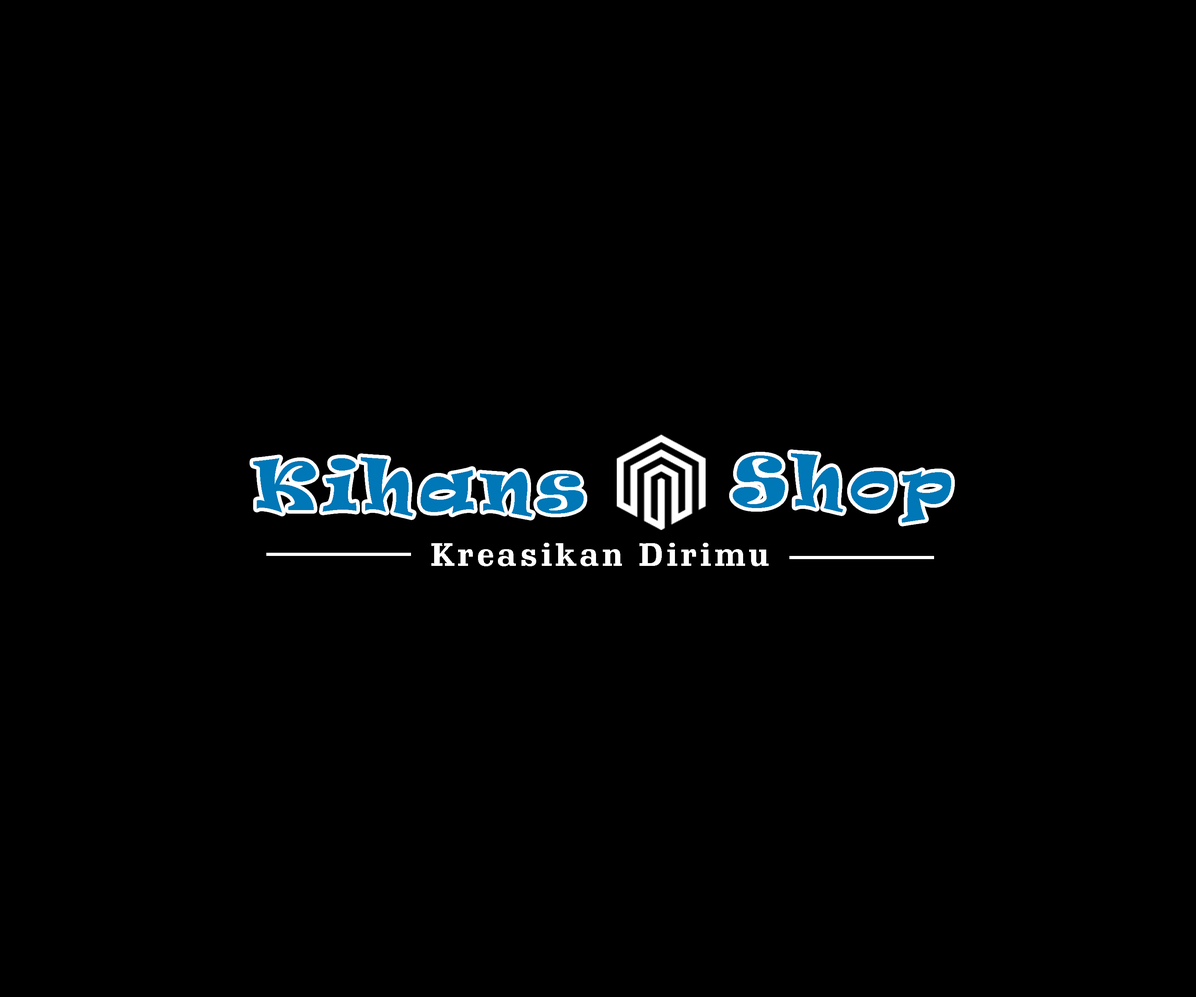
<style>
.page{position:relative;width:1196px;height:997px;background:#000000}
.page>*{position:absolute;margin:0}
.t1{font:65.4px "Ravie";letter-spacing:0.1em;color:#0077b6}
.t2{font:31.9px "SchadowBT-Bold";letter-spacing:0.1em;color:#ffffff}
</style>
<div class="page">
<p class="t1" style="left:253px;top:457px;width:331px;height:60px">Kihans</p>
<p class="t1" style="left:733px;top:453px;width:218px;height:70px">Shop</p>
<p class="t2" style="left:431px;top:543px;width:338px;height:23px">Kreasikan Dirimu</p>
</div>
